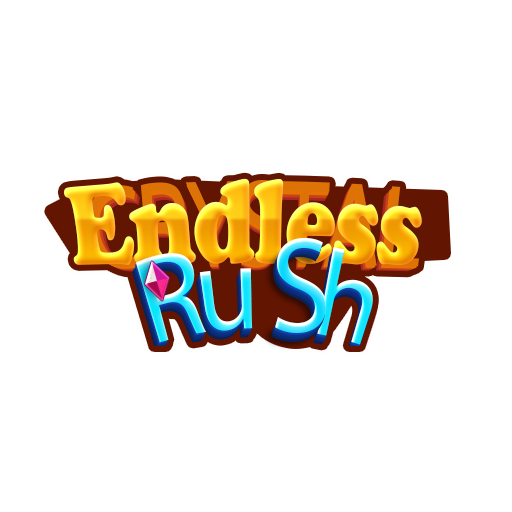
<style>
.page{position:relative;width:512px;height:512px;background:#ffffff}
.page>*{position:absolute;margin:0}
.t1{font:115px "CooperBlack";letter-spacing:-0.025em;scale:0.83 1}
.t2{font:137.5px "MyriadPro-Regular";scale:0.91 1}
.t3{font:124.6px "MyriadPro-Regular";letter-spacing:-0.075em;scale:0.77 1}
</style>
<div class="page">
<p class="t1" style="left:63px;top:178px;width:359px;height:88px">Endless</p>
<p class="t2" style="left:275px;top:237px;width:51px;height:97px">S</p>
<p class="t3" style="left:136px;top:247px;width:237px;height:98px">Ru    h</p>
</div>
